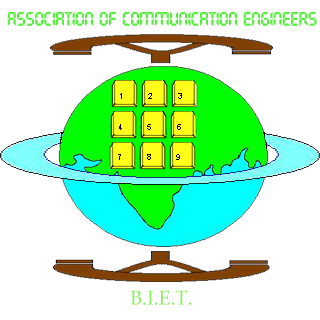
<style>
.page{position:relative;width:320px;height:320px;background:#ffffff}
.page>*{position:absolute;margin:0}
.t1{font:19.8px "Transistor";color:#57ee3f}
.t2{font:7.1px "ArialMT";color:#000000}
.t3{font:19.8px "BookAntiqua";color:#8bef5f}
</style>
<div class="page">
<p class="t1" style="left:7px;top:12px;width:310px;height:14px">Association of Communication Engineers</p>
<p class="t2" style="left:120px;top:93px;width:62px;height:6px">1             2             3</p>
<p class="t2" style="left:119px;top:124px;width:62px;height:6px">4             5             6</p>
<p class="t2" style="left:118px;top:154px;width:62px;height:6px">7             8             9</p>
<p class="t3" style="left:130px;top:290px;width:62px;height:15px">B.I.E.T.</p>
</div>
